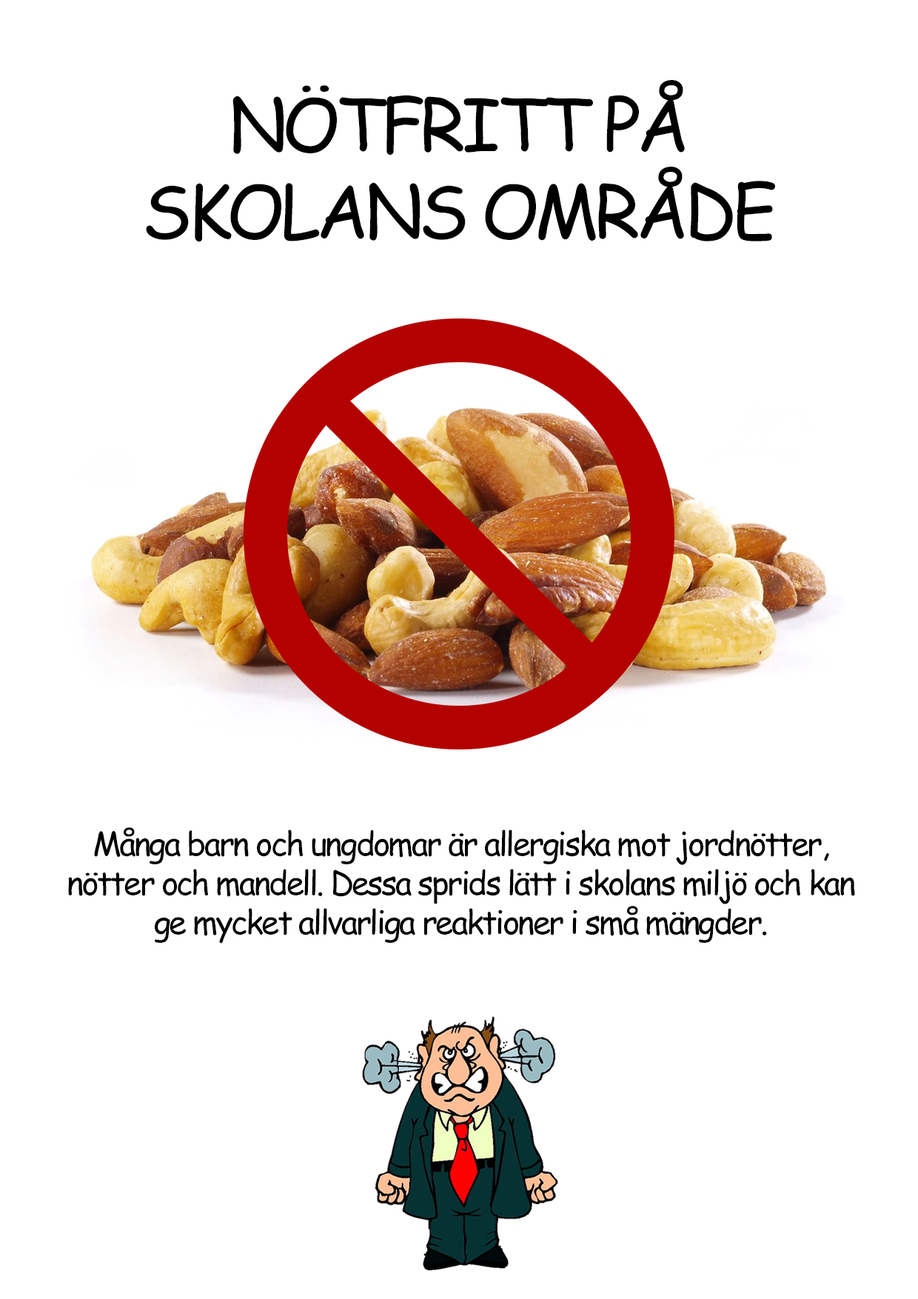
<style>
.page{position:relative;width:918px;height:1299px;background:#ffffff}
.page>*{position:absolute;margin:0}
.t1{font:72.5px "ComicSansMS";letter-spacing:-0.06em;color:#000000}
.t2{font:32.6px "ComicSansMS";letter-spacing:-0.06em;color:#000000}
</style>
<div class="page">
<p class="t1" style="left:146px;top:80px;width:629px;height:162px;text-align:center">NÖTFRITT PÅ<br>SKOLANS OMRÅDE</p>
<p class="t2" style="left:68px;top:827px;width:787px;height:116px;text-align:center">Många barn och ungdomar är allergiska mot jordnötter,<br>nötter och mandell. Dessa sprids lätt i skolans miljö och kan<br>ge mycket allvarliga reaktioner i små mängder.</p>
</div>
